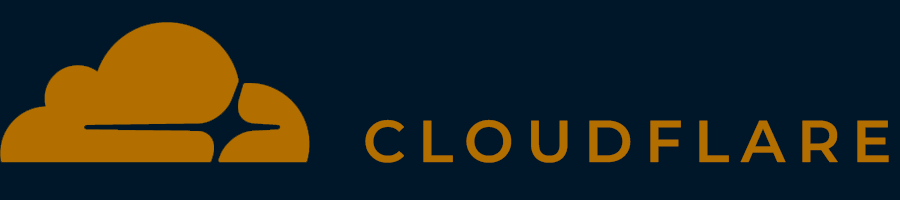
<style>
.page{position:relative;width:900px;height:200px;background:#001629}
.page>*{position:absolute;margin:0}
.t1{font:59px "MontserratRoman-SemiBold";letter-spacing:0.2em;color:#b26f00}
</style>
<div class="page">
<p class="t1" style="left:365px;top:119px;width:524px;height:44px">CLOUDFLARE</p>
</div>
